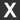
<style>
.page{position:relative;width:20px;height:20px;background:#333333}
.page>*{position:absolute;margin:0}
.t1{font:20px "Arial-BoldMT";color:#ffffff}
</style>
<div class="page">
<p class="t1" style="left:3px;top:2px;width:14px;height:16px">X</p>
</div>
